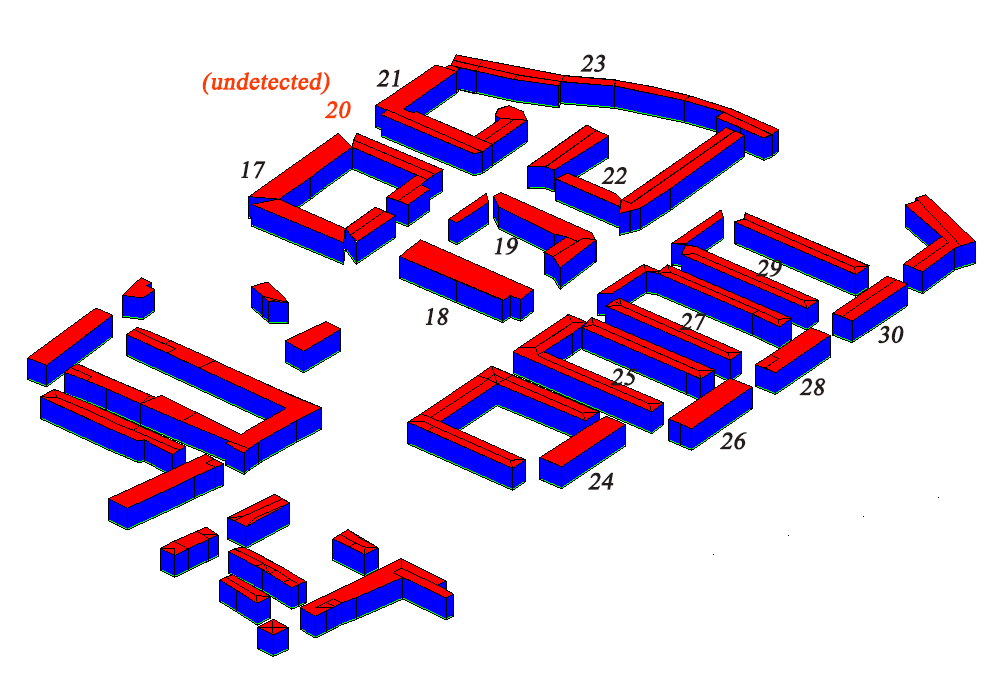
<style>
.page{position:relative;width:998px;height:688px;background:#ffffff}
.page>*{position:absolute;margin:0}
.t1{font:24px "TimesNewRomanPSMT";color:#241d1b;font-weight:bold;font-style:italic}
.t2{font:24px "TimesNewRomanPSMT";color:#f93e04;font-weight:bold;font-style:italic}
</style>
<div class="page">
<p class="t1" style="left:580px;top:54px;width:26px;height:18px">23</p>
<p class="t2" style="left:202px;top:72px;width:128px;height:23px">(undetected)</p>
<p class="t1" style="left:376px;top:69px;width:24px;height:18px">21</p>
<p class="t2" style="left:324px;top:101px;width:27px;height:18px">20</p>
<p class="t1" style="left:241px;top:161px;width:25px;height:18px">17</p>
<p class="t1" style="left:601px;top:167px;width:26px;height:17px">22</p>
<p class="t1" style="left:494px;top:237px;width:24px;height:18px">19</p>
<p class="t1" style="left:756px;top:259px;width:26px;height:18px">29</p>
<p class="t1" style="left:425px;top:307px;width:24px;height:19px">18</p>
<p class="t1" style="left:679px;top:312px;width:28px;height:19px">27</p>
<p class="t1" style="left:878px;top:325px;width:26px;height:19px">30</p>
<p class="t1" style="left:610px;top:368px;width:27px;height:18px">25</p>
<p class="t1" style="left:799px;top:378px;width:27px;height:18px">28</p>
<p class="t1" style="left:720px;top:432px;width:27px;height:18px">26</p>
<p class="t1" style="left:588px;top:472px;width:26px;height:18px">24</p>
</div>
